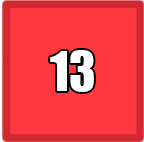
<style>
.page{position:relative;width:144px;height:142px;background:#ff3840}
.page>*{position:absolute;margin:0}
.t1{font:50px "Impact";color:#ffffff}
</style>
<div class="page">
<p class="t1" style="left:50px;top:50px;width:44px;height:42px">13</p>
</div>
